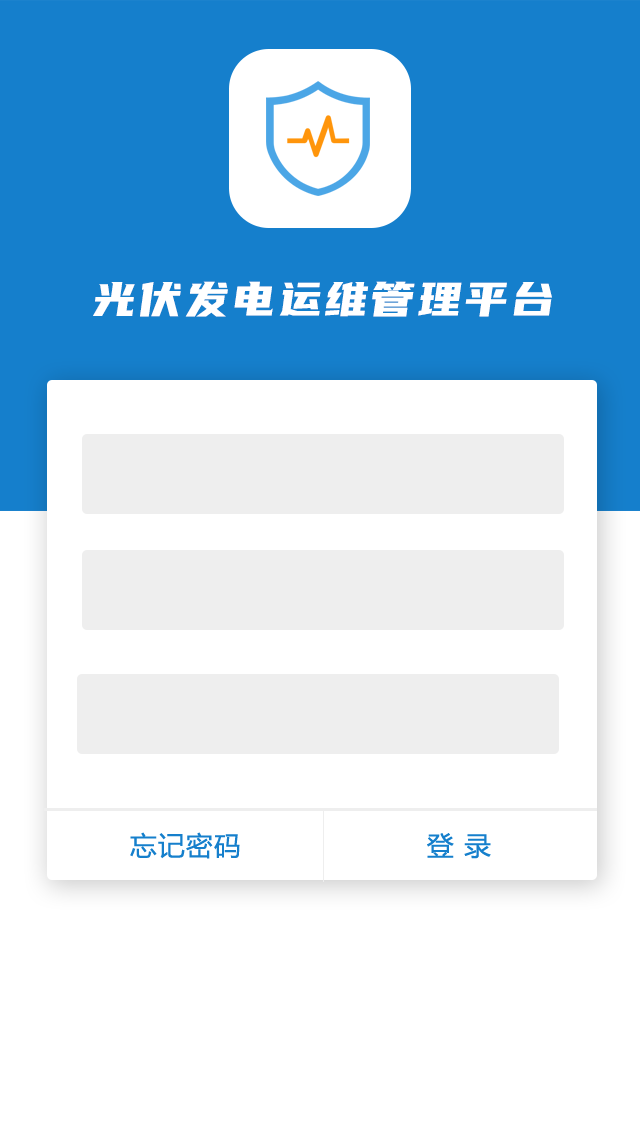
<style>
.page{position:relative;width:640px;height:1136px;background:#ffffff}
.page>*{position:absolute;margin:0}
.t1{font:48px "YouSheBiaoTiHei";letter-spacing:0.05em;color:#ffffff}
</style>
<div class="page">
<p class="t1" style="left:93px;top:281px;width:459px;height:36px">光伏发电运维管理平台</p>
</div>
